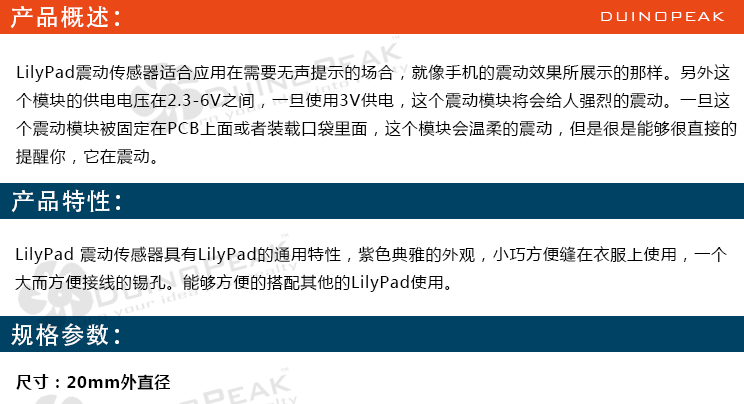
<style>
.page{position:relative;width:744px;height:404px;background:#ffffff}
.page>*{position:absolute;margin:0}
.t1{font:24px "AdobeHeitiStd-Regular";letter-spacing:0.05em;color:#ffffff}
.t2{font:18px "BankGothicBT-Light";letter-spacing:0.05em;color:#ffffff}
.t3{font:16px "MicrosoftYaHei";letter-spacing:0.05em;color:#000000}
.t4{font:16px "MicrosoftYaHei-Bold";letter-spacing:0.05em;color:#000000}
</style>
<div class="page">
<p class="t1" style="left:10px;top:6px;width:109px;height:23px">产品概述：</p>
<p class="t2" style="left:601px;top:12px;width:124px;height:9px">DUINOPEAK</p>
<p class="t3" style="left:16px;top:64px;width:721px;height:101px">LilyPad震动传感器适合应用在需要无声提示的场合，就像手机的震动效果所展示的那样。另外这<br>个模块的供电电压在2.3-6V之间，一旦使用3V供电，这个震动模块将会给人强烈的震动。一旦这<br>个震动模块被固定在PCB上面或者装载口袋里面，这个模块会温柔的震动，但是很是能够很直接的<br>提醒你，它在震动。</p>
<p class="t1" style="left:11px;top:189px;width:109px;height:24px">产品特性：</p>
<p class="t3" style="left:15px;top:246px;width:712px;height:46px">LilyPad 震动传感器具有LilyPad的通用特性，紫色典雅的外观，小巧方便缝在衣服上使用，一个<br>大而方便接线的锡孔。能够方便的搭配其他的LilyPad使用。</p>
<p class="t1" style="left:11px;top:323px;width:108px;height:23px">规格参数：</p>
<p class="t4" style="left:16px;top:374px;width:155px;height:16px">尺寸：20mm外直径</p>
</div>
